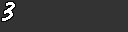
<style>
.page{position:relative;width:128px;height:32px;background:#333333}
.page>*{position:absolute;margin:0}
.t1{font:30px "DomDiagonalBT-Regular";color:#ffffff}
</style>
<div class="page">
<p class="t1" style="left:2px;top:2px;width:13px;height:19px">3</p>
</div>
